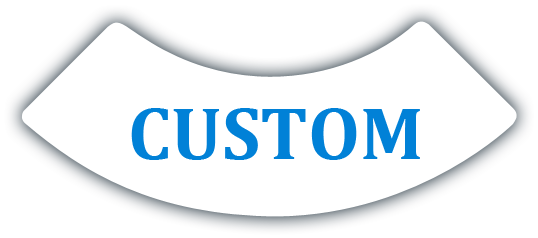
<style>
.page{position:relative;width:538px;height:238px;background:#ffffff}
.page>*{position:absolute;margin:0}
.t1{font:75px "Cambria-Bold";color:#0181d8}
</style>
<div class="page">
<p class="t1" style="left:131px;top:108px;width:289px;height:52px">CUSTOM</p>
</div>
